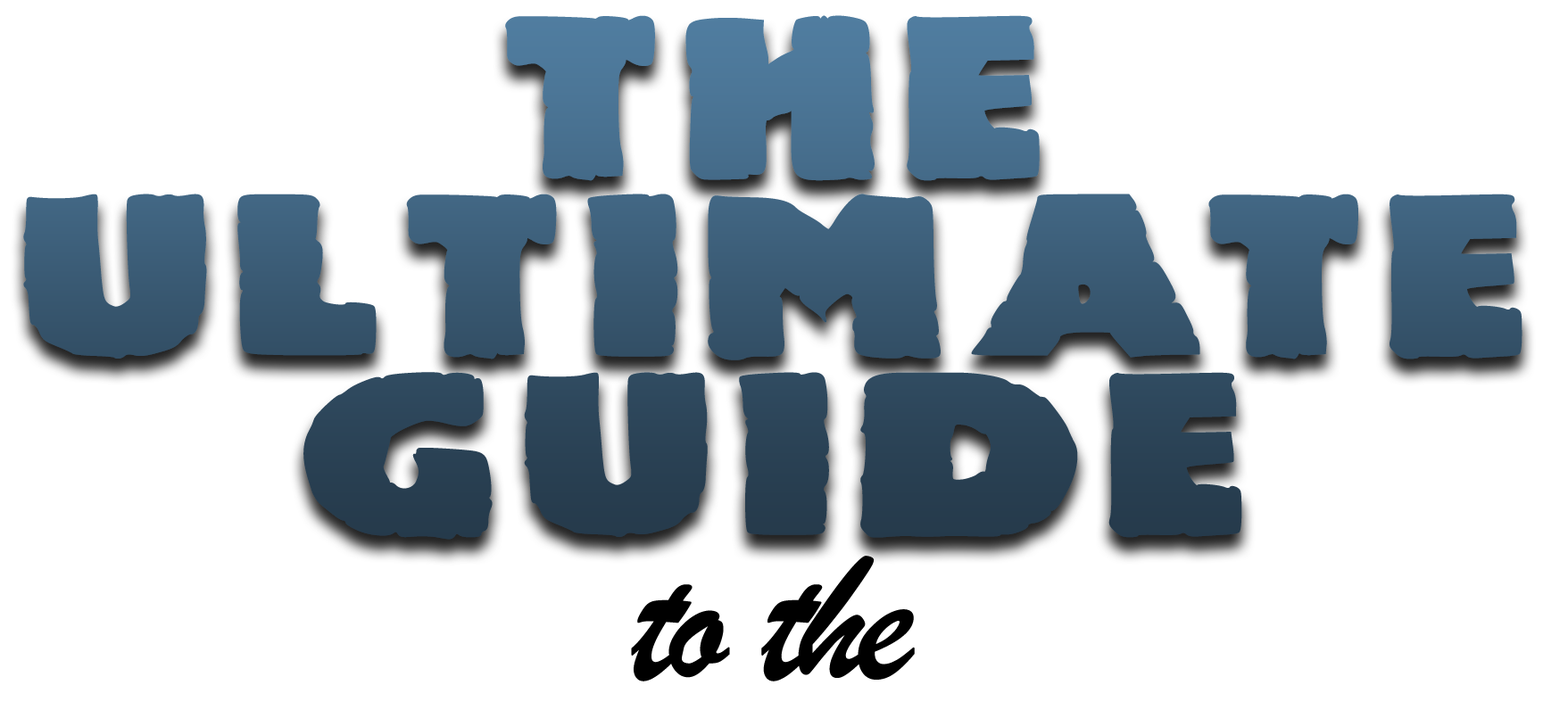
<style>
.page{position:relative;width:1568px;height:710px;background:#ffffff}
.page>*{position:absolute;margin:0}
.t1{font:185.9px/178.5px "JMHMummySolid-Regular";letter-spacing:0.05em;font-weight:bold;scale:1.25 1}
.t2{font:185.9px "BrushScriptMT";letter-spacing:-0.075em;color:#000000;font-weight:bold}
</style>
<div class="page">
<p class="t1" style="left:23px;top:15px;width:1499px;height:525px;text-align:center">The<br>Ultimate<br>Guide</p>
<p class="t2" style="left:631px;top:556px;width:284px;height:126px">to the</p>
</div>
